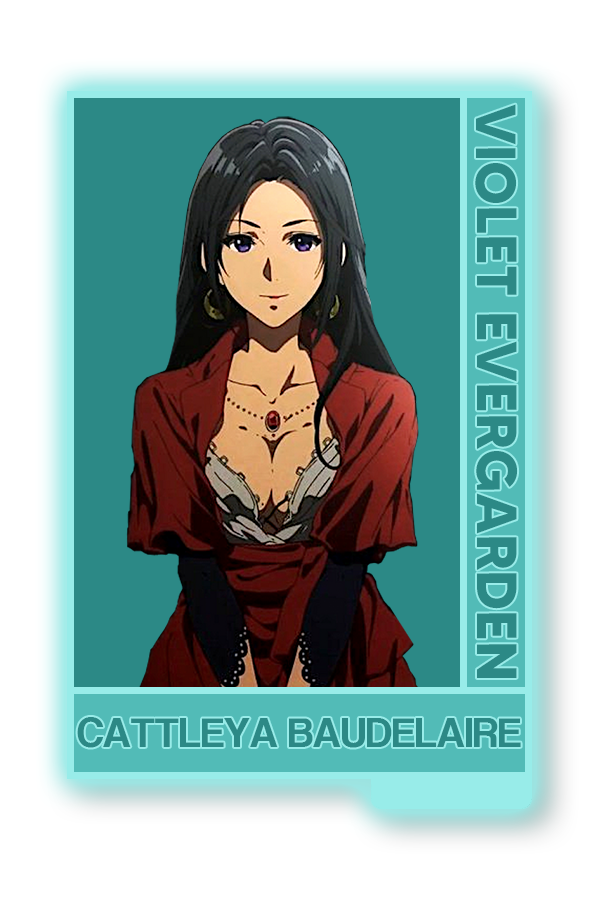
<style>
.page{position:relative;width:600px;height:900px;background:#ffffff}
.page>*{position:absolute;margin:0}
.t1{font:56.4px "MADETOMMY-Bold";color:#2c8986}
.t2{font:43.3px "CoolveticaRg-Regular";color:#2c8986}
</style>
<div class="page">
<p class="t1" style="left:475px;top:104px;width:43px;height:574px;rotate:90deg">VIOLET EVERGARDEN</p>
<p class="t2" style="left:77px;top:717px;width:444px;height:31px">CATTLEYA BAUDELAIRE</p>
</div>
